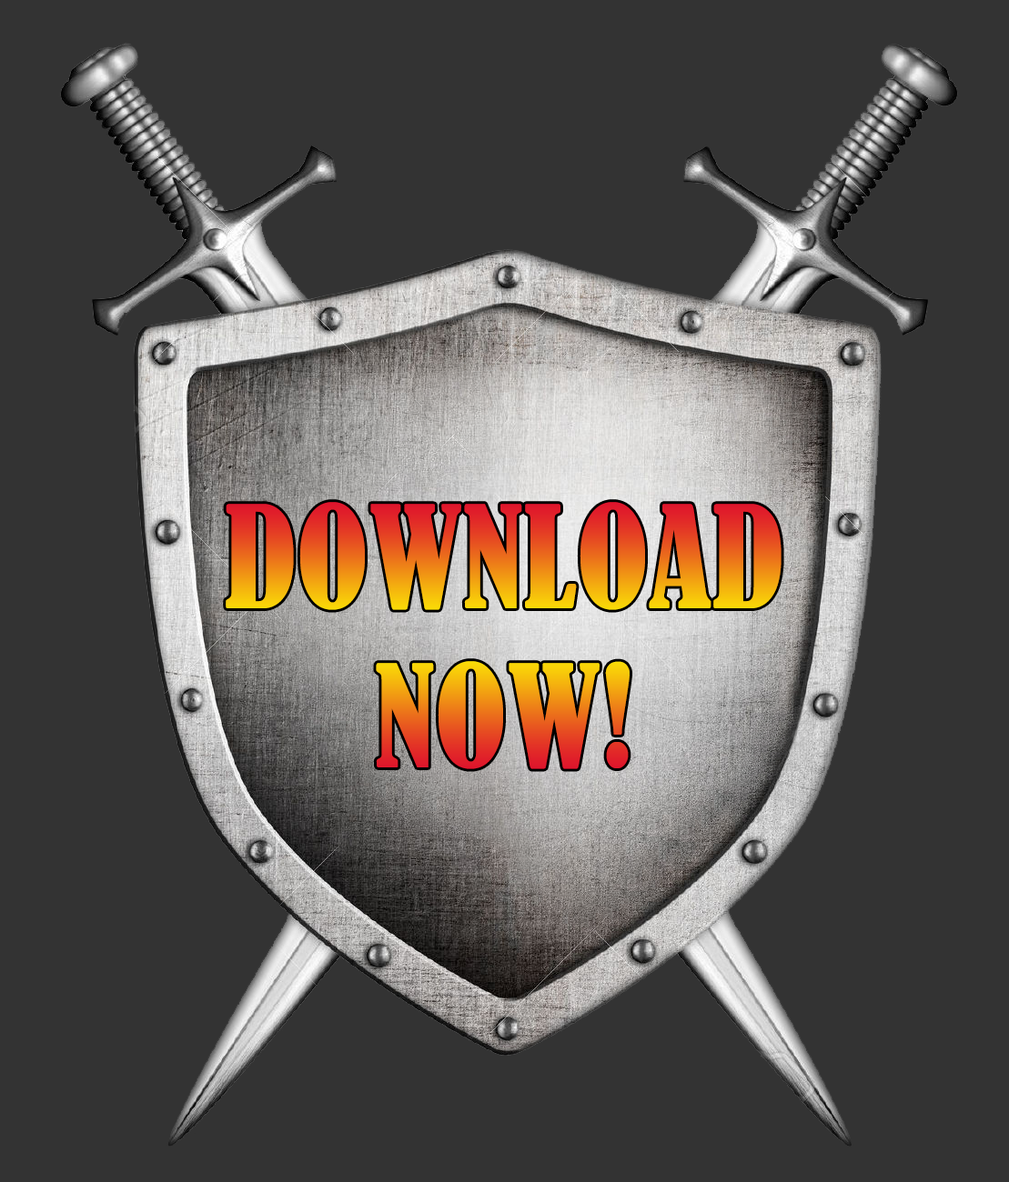
<style>
.page{position:relative;width:1009px;height:1182px;background:#333333}
.page>*{position:absolute;margin:0}
.t1{font:132.6px "BernardMT-Condensed";text-transform:uppercase}
</style>
<div class="page">
<p class="t1" style="left:226px;top:502px;width:555px;height:267px;text-align:center">Download <br>Now!</p>
</div>
